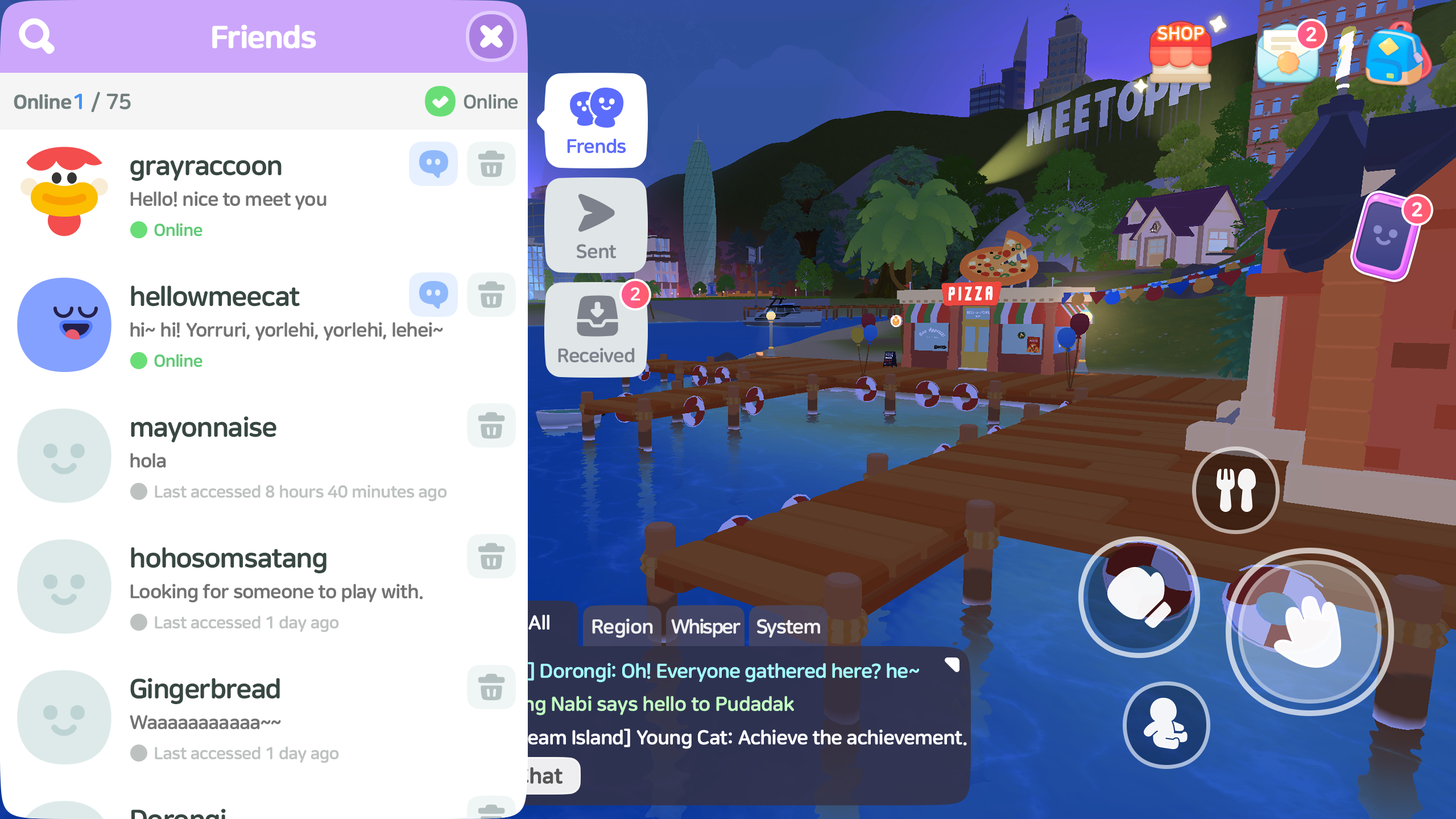
<style>
.page{position:relative;width:1456px;height:819px;background:#ffffff}
.page>*{position:absolute;margin:0}
.t1{font:30.7px "NanumSquareRoundOTFEB";letter-spacing:-0.03em;color:#ffffff;font-weight:bold}
.t2{font:19.3px "NanumSquareRoundOTFEB";letter-spacing:-0.03em;color:#727e7e;font-weight:bold}
.t3{font:21.6px "NanumSquareRoundOTFEB";color:#727e7e}
.t4{font:21.6px "NanumSquareRoundOTFEB";color:#4193f7}
.t5{font:19.3px "NanumSquareRoundOTFEB";letter-spacing:-0.03em;color:#727e7e}
.t6{font:19.3px "NanumSquareRoundOTFEB";letter-spacing:-0.03em;color:#5c6cfc}
.t7{font:27.3px "NanumSquareRoundOTFEB";letter-spacing:-0.03em;color:#384742}
.t8{font:19.3px "NanumSquareRoundOTFEB";letter-spacing:-0.03em;color:#737373}
.t9{font:17.1px "NanumSquareRoundOTFEB";letter-spacing:-0.03em;color:#5dcb74}
.t10{font:19.3px "NanumSquareRoundOTFEB";letter-spacing:-0.03em;color:#7d818c}
.t11{font:18.2px "NanumSquareRoundEB";color:#ffffff}
.t12{font:17.1px "NanumSquareRoundOTFEB";letter-spacing:-0.03em;color:#bdc2c0}
</style>
<div class="page">
<p class="t1" style="left:212px;top:24px;width:104px;height:24px">Friends</p>
<p class="t2" style="left:14px;top:94px;width:58px;height:15px">Online</p>
<p class="t3" style="left:74px;top:92px;width:57px;height:21px"><span class="t4">1 </span>/ 75</p>
<p class="t5" style="left:464px;top:94px;width:54px;height:15px">Online</p>
<p class="t6" style="left:567px;top:138px;width:59px;height:16px">Frends</p>
<p class="t7" style="left:130px;top:160px;width:152px;height:21px">grayraccoon</p>
<p class="t8" style="left:130px;top:191px;width:196px;height:19px">Hello! nice to meet you</p>
<p class="t9" style="left:154px;top:223px;width:48px;height:14px">Online</p>
<p class="t10" style="left:577px;top:244px;width:40px;height:15px">Sent</p>
<p class="t7" style="left:131px;top:286px;width:169px;height:21px">hellowmeecat</p>
<p class="t11" style="left:631px;top:287px;width:9px;height:14px">2</p>
<p class="t8" style="left:130px;top:322px;width:313px;height:19px">hi~ hi! Yorruri, yorlehi, yorlehi, lehei~</p>
<p class="t9" style="left:154px;top:354px;width:48px;height:13px">Online</p>
<p class="t10" style="left:558px;top:348px;width:77px;height:15px">Received</p>
<p class="t7" style="left:131px;top:416px;width:145px;height:26px">mayonnaise</p>
<p class="t8" style="left:130px;top:453px;width:36px;height:15px">hola</p>
<p class="t12" style="left:155px;top:485px;width:292px;height:17px">Last accessed 8 hours 40 minutes ago</p>
<p class="t7" style="left:131px;top:547px;width:195px;height:26px">hohosomsatang</p>
<p class="t8" style="left:130px;top:584px;width:293px;height:18px">Looking for someone to play with.</p>
<p class="t12" style="left:155px;top:615px;width:184px;height:17px">Last accessed 1 day ago</p>
<p class="t7" style="left:130px;top:678px;width:150px;height:26px">Gingerbread</p>
<p class="t8" style="left:130px;top:715px;width:151px;height:15px">Waaaaaaaaaaa~~</p>
<p class="t12" style="left:155px;top:746px;width:184px;height:17px">Last accessed 1 day ago</p>
</div>
